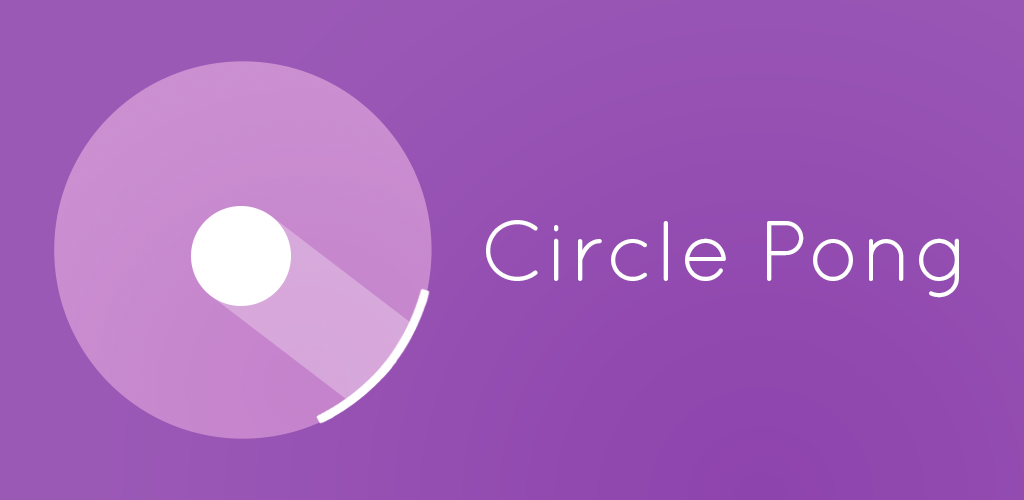
<style>
.page{position:relative;width:1024px;height:500px}
.page>*{position:absolute;margin:0}
.t1{font:86px "Quicksand-Regular";color:#ffffff}
</style>
<div class="page">
<p class="t1" style="left:486px;top:220px;width:473px;height:78px">Circle Pong</p>
</div>
